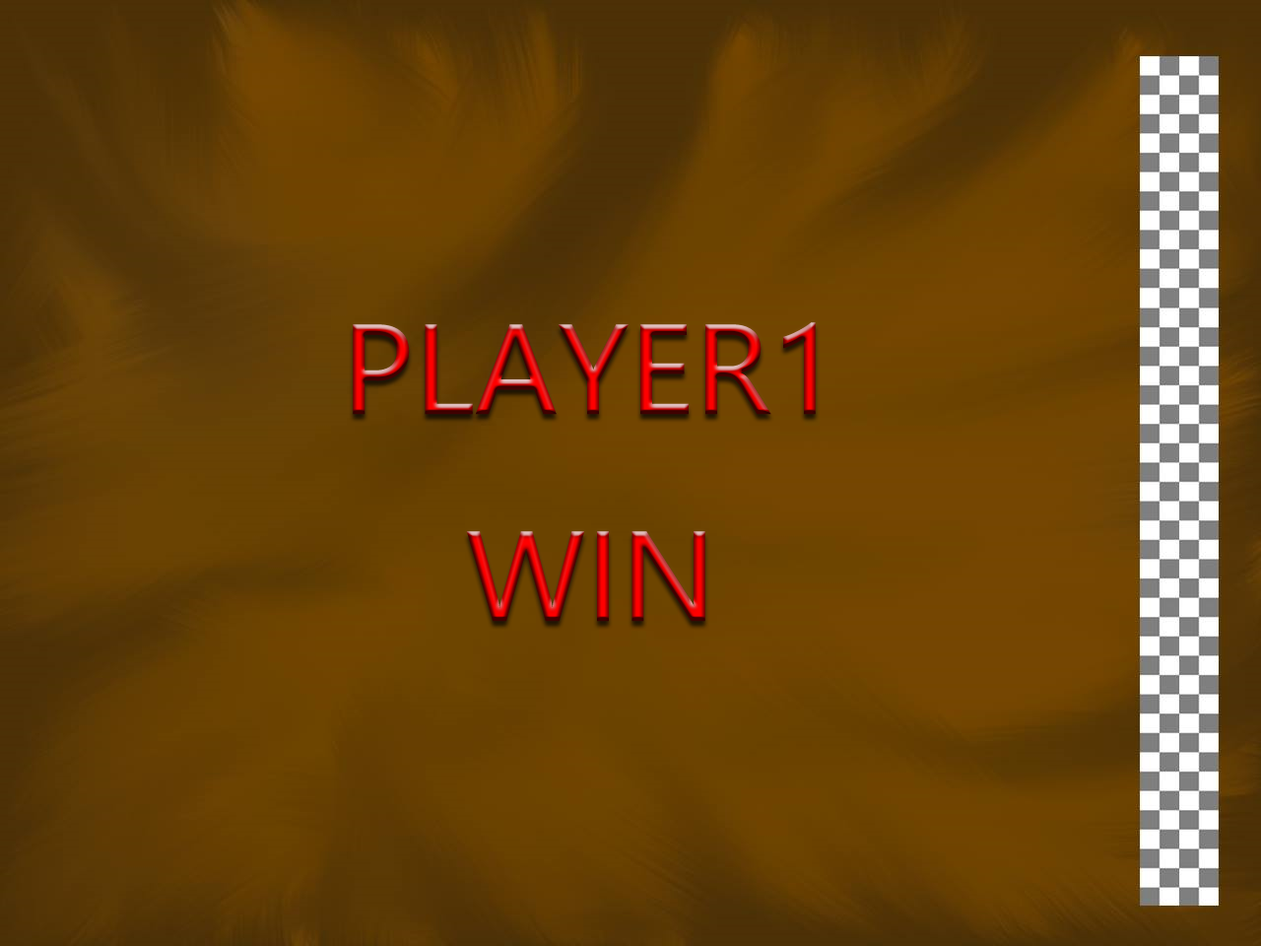
<style>
.page{position:relative;width:1261px;height:946px}
.page>*{position:absolute;margin:0}
.t1{font:118.2px "MicrosoftYaHei"}
</style>
<div class="page">
<p class="t1" style="left:353px;top:322px;width:463px;height:300px;text-align:center">PLAYER1<br>WIN</p>
</div>
